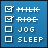
<style>
.page{position:relative;width:48px;height:48px}
.page>*{position:absolute;margin:0}
.t1{font:9px "Silkscreen";color:#ffffff}
</style>
<div class="page">
<p class="t1" style="left:18px;top:7px;width:20px;height:5px">Milk</p>
<p class="t1" style="left:18px;top:17px;width:18px;height:5px">Rice</p>
<p class="t1" style="left:18px;top:27px;width:16px;height:5px">Jog</p>
<p class="t1" style="left:18px;top:37px;width:25px;height:5px">Sleep</p>
</div>
